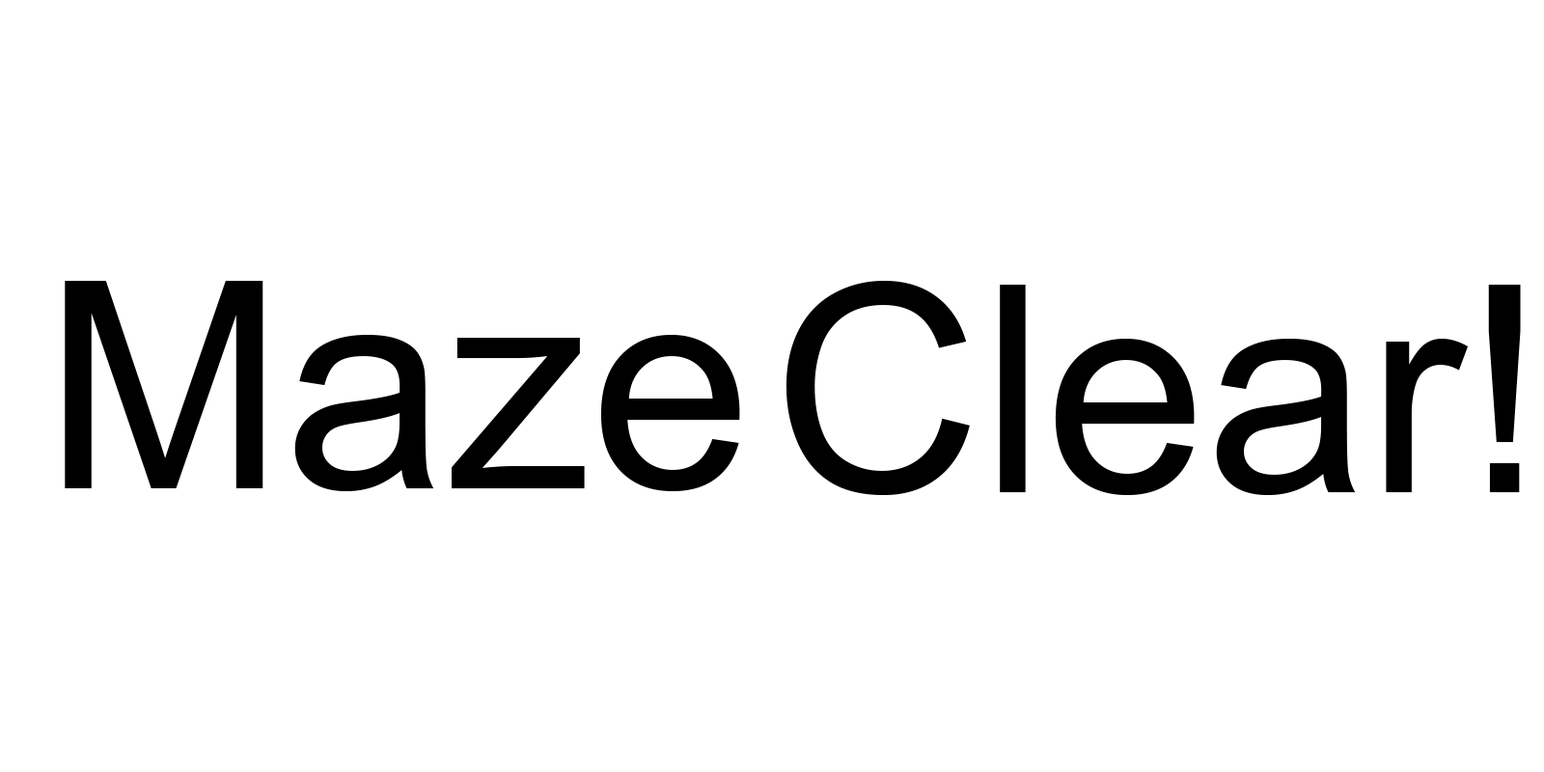
<style>
.page{position:relative;width:1544px;height:772px;background:#ffffff}
.page>*{position:absolute;margin:0}
.t1{font:289.6px "ArialMT";color:#000000}
</style>
<div class="page">
<p class="t1" style="left:65px;top:281px;width:675px;height:210px">Maze</p>
<p class="t1" style="left:786px;top:281px;width:735px;height:214px">Clear!</p>
</div>
